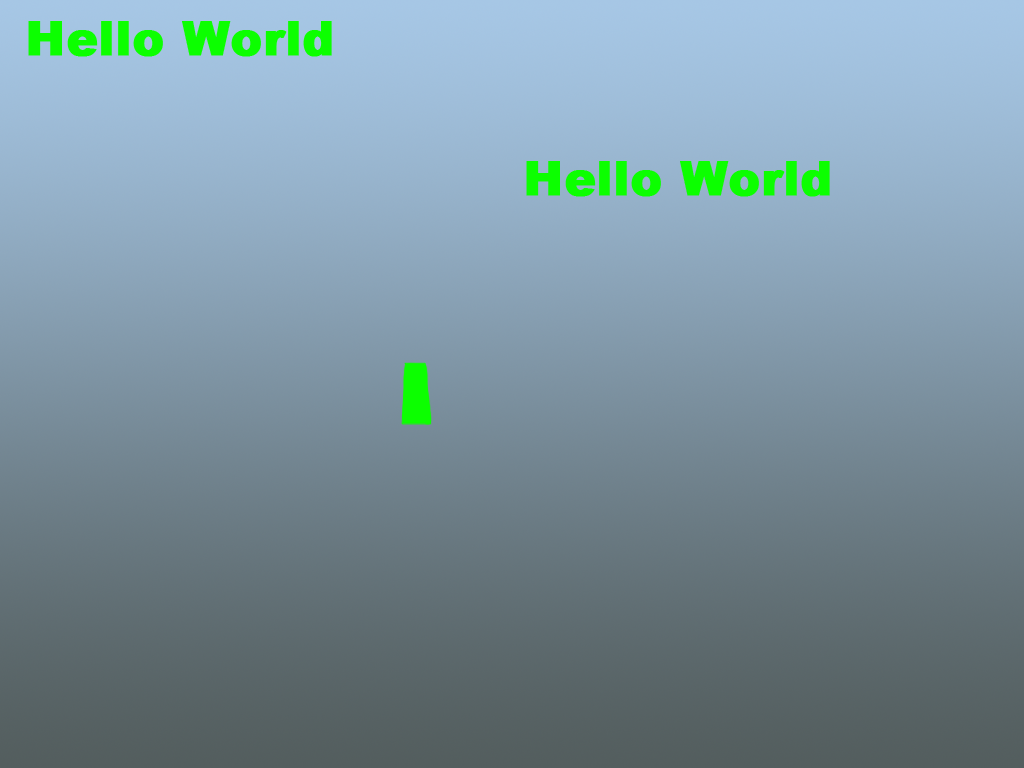
<style>
.page{position:relative;width:1024px;height:768px}
.page>*{position:absolute;margin:0}
.t1{font:47px "Arial-Black";color:#0cff00;font-weight:bold}
</style>
<div class="page">
<p class="t1" style="left:28px;top:21px;width:304px;height:36px">Hello World</p>
<p class="t1" style="left:526px;top:161px;width:304px;height:36px">Hello World</p>
</div>
